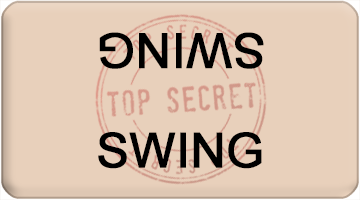
<style>
.page{position:relative;width:360px;height:200px;background:#e8d0bb}
.page>*{position:absolute;margin:0}
.t1{font:48px "ArialMT";color:#000000;font-weight:bold}
</style>
<div class="page">
<p class="t1" style="left:99px;top:32px;width:165px;height:37px;rotate:180deg">SWING</p>
<p class="t1" style="left:98px;top:132px;width:164px;height:37px">SWING</p>
</div>
